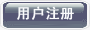
<style>
.page{position:relative;width:90px;height:30px;background:#555674}
.page>*{position:absolute;margin:0}
.t1{font:14px "SimHei";letter-spacing:0.04em;color:#fafbfc;font-weight:bold}
</style>
<div class="page">
<p class="t1" style="left:17px;top:6px;width:57px;height:14px">用户注册</p>
</div>
